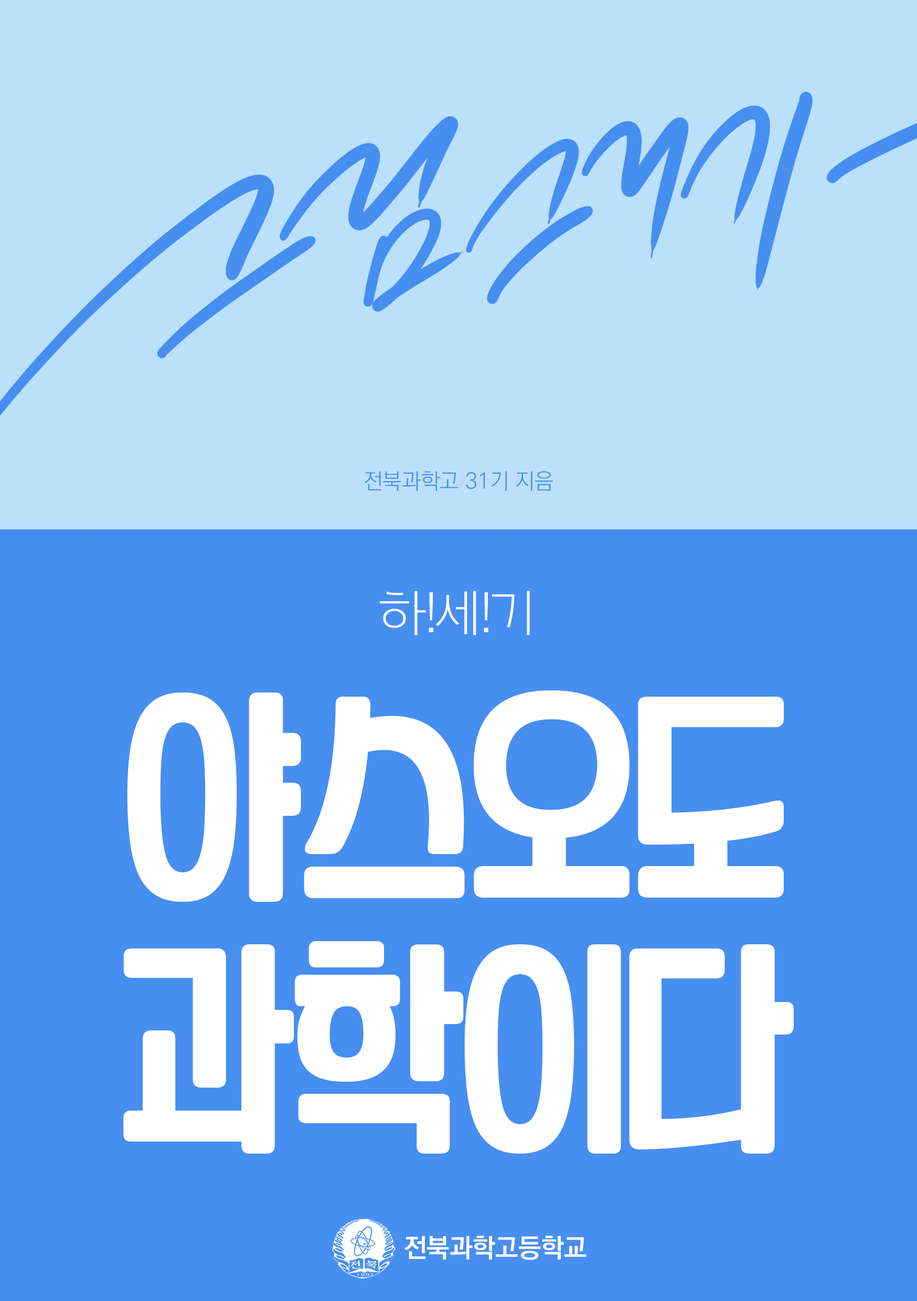
<style>
.page{position:relative;width:917px;height:1301px;background:#478ef1}
.page>*{position:absolute;margin:0}
.t1{font:21.9px "KoPubWorldDotumLight";color:#478ef1}
.t2{font:52.4px "Arita-dotum-Light_OTF";letter-spacing:-0.075em;color:#ffffff}
.t3{font:209.8px "YANGJIN";letter-spacing:-0.075em;color:#ffffff}
.t4{font:26.2px "KoPubWorldDotumBold";color:#ffffff}
</style>
<div class="page">
<p class="t1" style="left:364px;top:471px;width:189px;height:20px">전북과학고 31기 지음</p>
<p class="t2" style="left:380px;top:591px;width:150px;height:44px">하!세!기</p>
<p class="t3" style="left:123px;top:690px;width:671px;height:463px;text-align:center">야스오도<br>과학이다</p>
<p class="t4" style="left:404px;top:1235px;width:182px;height:25px">전북과학고등학교</p>
</div>
